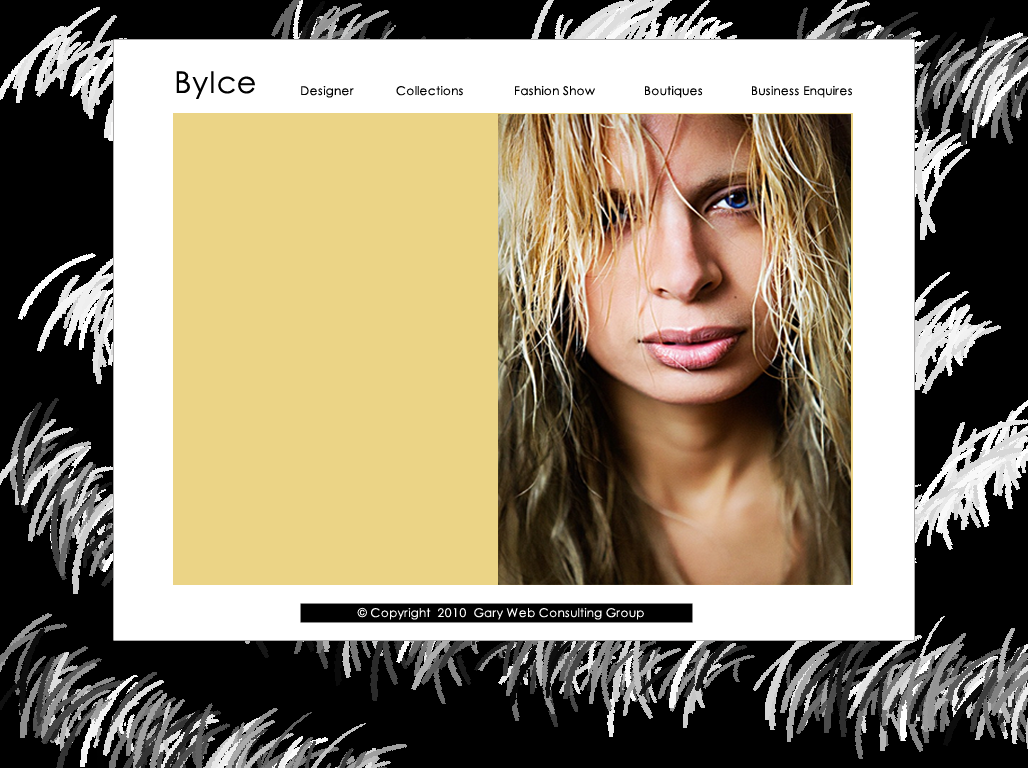
<style>
.page{position:relative;width:1028px;height:768px;background:#000000}
.page>*{position:absolute;margin:0}
.t1{font:30px "CenturyGothic";letter-spacing:0.03em;color:#000000}
.t2{font:12px "CenturyGothic";letter-spacing:0.03em;color:#000000}
.t3{font:12px "CenturyGothic";letter-spacing:0.03em;color:#ffffff}
</style>
<div class="page">
<p class="t1" style="left:176px;top:71px;width:79px;height:28px">ByIce</p>
<p class="t2" style="left:301px;top:86px;width:53px;height:12px">Designer</p>
<p class="t2" style="left:396px;top:86px;width:67px;height:10px">Collections</p>
<p class="t2" style="left:515px;top:86px;width:80px;height:10px">Fashion Show</p>
<p class="t2" style="left:645px;top:86px;width:58px;height:12px">Boutiques</p>
<p class="t2" style="left:752px;top:86px;width:100px;height:12px">Business Enquires</p>
<p class="t3" style="left:357px;top:607px;width:287px;height:13px">© Copyright  2010  Gary Web Consulting Group</p>
</div>
